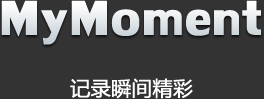
<style>
.page{position:relative;width:264px;height:99px;background:#333333}
.page>*{position:absolute;margin:0}
.t1{font:72px "LilyUPCBold";color:#e6ebed;font-weight:bold}
.t2{font:20px "MicrosoftYaHei";color:#ffffff;font-weight:bold}
</style>
<div class="page">
<p class="t1" style="left:1px;top:0px;width:260px;height:45px">MyMoment</p>
<p class="t2" style="left:70px;top:78px;width:123px;height:21px">记录瞬间精彩</p>
</div>
